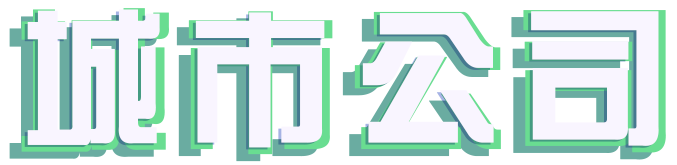
<style>
.page{position:relative;width:677px;height:165px;background:#f9f5ff}
.page>*{position:absolute;margin:0}
.t1{font:152.6px "FZZYJW--GB1-0";letter-spacing:0.12em;color:#f9f5ff;font-weight:bold;scale:0.95 1}
</style>
<div class="page">
<p class="t1" style="left:27px;top:9px;width:632px;height:139px">城市公司</p>
</div>
